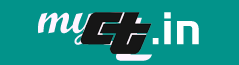
<style>
.page{position:relative;width:239px;height:65px;background:#02938a}
.page>*{position:absolute;margin:0}
.t1{font:48px "ScriptMTBold";color:#fff4ff}
.t2{font:81.4px "Magneto-Bold"}
.t3{font:48px "HandelGotD-Bold";color:#ffffff}
</style>
<div class="page">
<p class="t1" style="left:38px;top:12px;width:60px;height:33px">my</p>
<p class="t2" style="left:115px;top:17px;width:37px;height:44px">t</p>
<p class="t3" style="left:152px;top:12px;width:47px;height:33px">.in</p>
</div>
